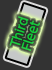
<style>
.page{position:relative;width:52px;height:70px;background:#333333}
.page>*{position:absolute;margin:0}
.t1{font:12px/12px "UDShinGoPro-Light";color:#13d03c;font-weight:bold}
</style>
<div class="page">
<p class="t1" style="left:9px;top:16px;width:31px;height:35px;text-align:center;rotate:-72deg">Third<br>Fleet</p>
</div>
